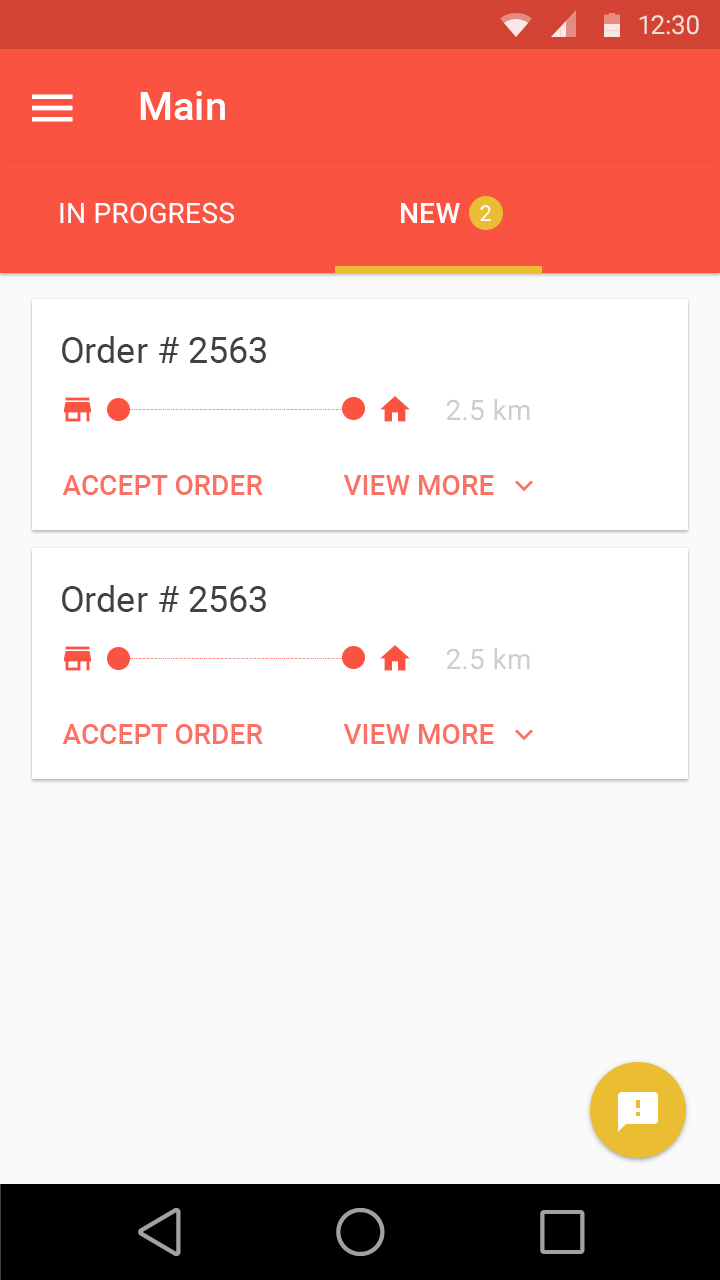
<style>
.page{position:relative;width:720px;height:1280px;background:#fafafa}
.page>*{position:absolute;margin:0}
.t1{font:26px "Roboto-Regular";color:#f5dcda}
.t2{font:40px "Roboto-Medium";color:#ffffff}
.t3{font:28px "Roboto-Regular";letter-spacing:0.01em;color:#ffffff;text-transform:uppercase}
.t4{font:28px "Roboto-Medium";letter-spacing:0.01em;color:#ffffff;text-transform:uppercase}
.t5{font:22px "Roboto-Regular";letter-spacing:0.01em;color:#ffffff;text-transform:uppercase}
.t6{font:36px "Roboto-Regular";color:#414141}
.t7{font:28px "Roboto-Regular";letter-spacing:0.01em;color:#cdcdcd;text-transform:uppercase}
.t8{font:28px "Roboto-Regular";letter-spacing:0.01em;color:#cdcdcd}
.t9{font:28px "Roboto-Medium";color:#fb7165;text-transform:uppercase}
</style>
<div class="page">
<p class="t1" style="left:639px;top:15px;width:60px;height:20px">12:30</p>
<p class="t2" style="left:140px;top:91px;width:85px;height:29px">Main</p>
<p class="t3" style="left:60px;top:202px;width:174px;height:22px">in progress</p>
<p class="t4" style="left:401px;top:203px;width:59px;height:20px">New</p>
<p class="t5" style="left:480px;top:205px;width:11px;height:16px">2</p>
<p class="t6" style="left:62px;top:336px;width:204px;height:27px">Order # 2563</p>
<p class="t7" style="left:446px;top:399px;width:84px;height:22px">2.5 <span class="t8">km</span></p>
<p class="t9" style="left:62px;top:475px;width:201px;height:20px">Accept order</p>
<p class="t9" style="left:343px;top:475px;width:151px;height:20px">View More</p>
<p class="t6" style="left:62px;top:585px;width:204px;height:27px">Order # 2563</p>
<p class="t7" style="left:446px;top:648px;width:84px;height:22px">2.5 <span class="t8">km</span></p>
<p class="t9" style="left:62px;top:724px;width:201px;height:20px">Accept order</p>
<p class="t9" style="left:343px;top:724px;width:151px;height:20px">View More</p>
</div>
